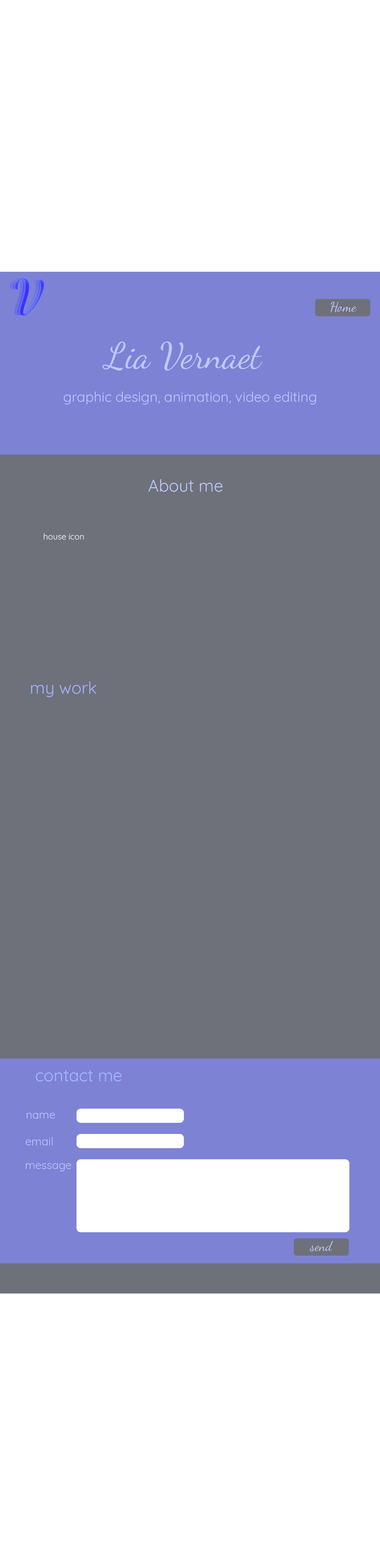
<style>
.page{position:relative;width:380px;height:1568px;background:#6e717a}
.page>*{position:absolute;margin:0}
.t1{font:13.4px "DancingScriptOT";color:#c0c8ff}
.t2{font:36.2px "DancingScriptOT";color:#c0c8ff}
.t3{font:13.9px "Quicksand-Regular";color:#c0c8ff}
.t4{font:16.7px "Quicksand-Regular";color:#c0c8ff}
.t5{font:8.4px "Quicksand-Regular";color:#ffffff}
.t6{font:16.7px "Quicksand-Regular";color:#a5b1ff}
.t7{font:16.7px "Quicksand-Regular";color:#a5baff}
.t8{font:11.1px "Quicksand-Regular";color:#c0c8ff}
</style>
<div class="page">
<p class="t1" style="left:331px;top:302px;width:26px;height:10px">Home</p>
<p class="t2" style="left:102px;top:341px;width:161px;height:30px">Lia Vernaet</p>
<p class="t3" style="left:64px;top:391px;width:252px;height:14px">graphic design, animation, video editing</p>
<p class="t4" style="left:148px;top:479px;width:75px;height:13px">About me</p>
<p class="t5" style="left:44px;top:533px;width:40px;height:7px">house icon</p>
<p class="t6" style="left:31px;top:681px;width:65px;height:16px">my work</p>
<p class="t7" style="left:36px;top:1070px;width:86px;height:12px">contact me</p>
<p class="t8" style="left:27px;top:1113px;width:28px;height:6px">name</p>
<p class="t8" style="left:26px;top:1137px;width:27px;height:8px">email</p>
<p class="t8" style="left:26px;top:1163px;width:45px;height:8px">message</p>
<p class="t1" style="left:310px;top:1241px;width:23px;height:10px">send</p>
</div>
